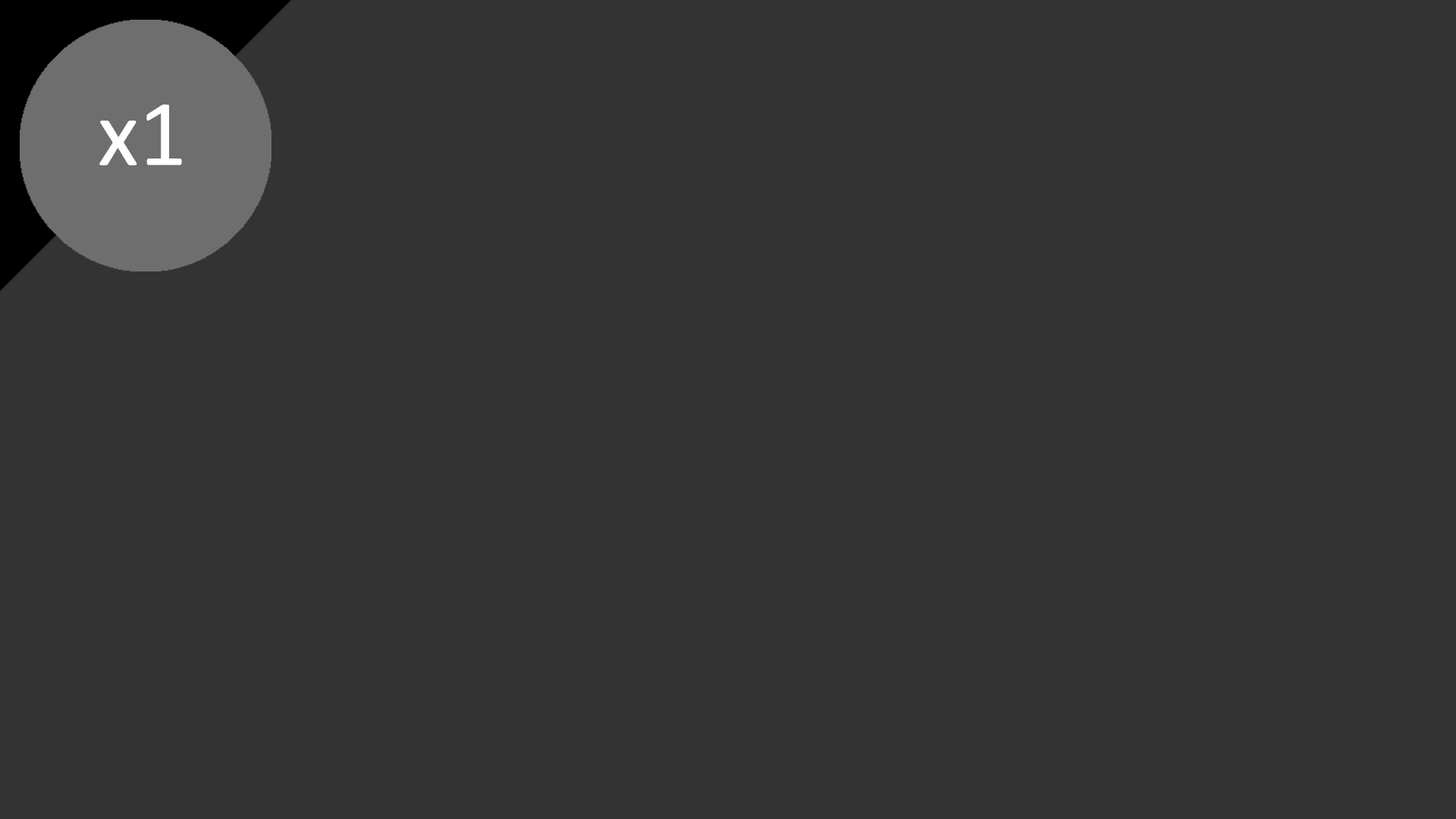
<style>
.page{position:relative;width:1456px;height:819px;background:#333333}
.page>*{position:absolute;margin:0}
.t1{font:94.8px "Calibri";color:#ffffff}
</style>
<div class="page">
<p class="t1" style="left:99px;top:104px;width:83px;height:61px">x1</p>
</div>
